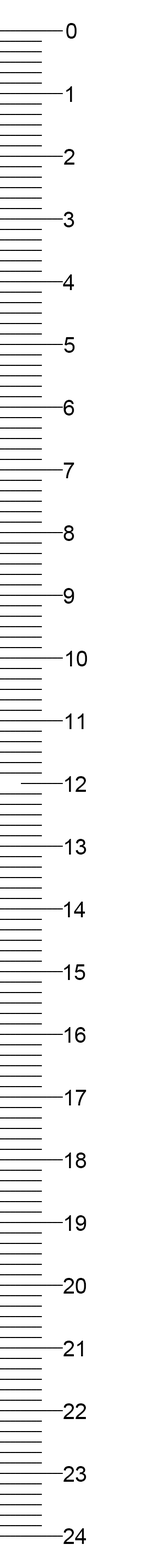
<style>
.page{position:relative;width:157px;height:1568px;background:#ffffff}
.page>*{position:absolute;margin:0}
.t1{font:21.8px "ArialMT";color:#000000}
</style>
<div class="page">
<p class="t1" style="left:66px;top:23px;width:11px;height:16px">0</p>
<p class="t1" style="left:66px;top:86px;width:6px;height:16px">1</p>
<p class="t1" style="left:64px;top:149px;width:11px;height:16px">2</p>
<p class="t1" style="left:63px;top:212px;width:11px;height:15px">3</p>
<p class="t1" style="left:63px;top:274px;width:11px;height:16px">4</p>
<p class="t1" style="left:64px;top:337px;width:11px;height:16px">5</p>
<p class="t1" style="left:63px;top:400px;width:11px;height:16px">6</p>
<p class="t1" style="left:64px;top:463px;width:10px;height:15px">7</p>
<p class="t1" style="left:63px;top:525px;width:11px;height:16px">8</p>
<p class="t1" style="left:63px;top:588px;width:11px;height:16px">9</p>
<p class="t1" style="left:66px;top:651px;width:21px;height:15px">10</p>
<p class="t1" style="left:65px;top:713px;width:19px;height:16px">11</p>
<p class="t1" style="left:65px;top:776px;width:21px;height:16px">12</p>
<p class="t1" style="left:65px;top:839px;width:21px;height:16px">13</p>
<p class="t1" style="left:64px;top:902px;width:21px;height:15px">14</p>
<p class="t1" style="left:64px;top:964px;width:21px;height:16px">15</p>
<p class="t1" style="left:64px;top:1027px;width:22px;height:16px">16</p>
<p class="t1" style="left:65px;top:1090px;width:21px;height:15px">17</p>
<p class="t1" style="left:65px;top:1152px;width:21px;height:16px">18</p>
<p class="t1" style="left:65px;top:1215px;width:21px;height:16px">19</p>
<p class="t1" style="left:63px;top:1278px;width:23px;height:16px">20</p>
<p class="t1" style="left:63px;top:1341px;width:20px;height:15px">21</p>
<p class="t1" style="left:63px;top:1403px;width:23px;height:16px">22</p>
<p class="t1" style="left:63px;top:1466px;width:23px;height:16px">23</p>
<p class="t1" style="left:63px;top:1528px;width:23px;height:16px">24</p>
</div>
